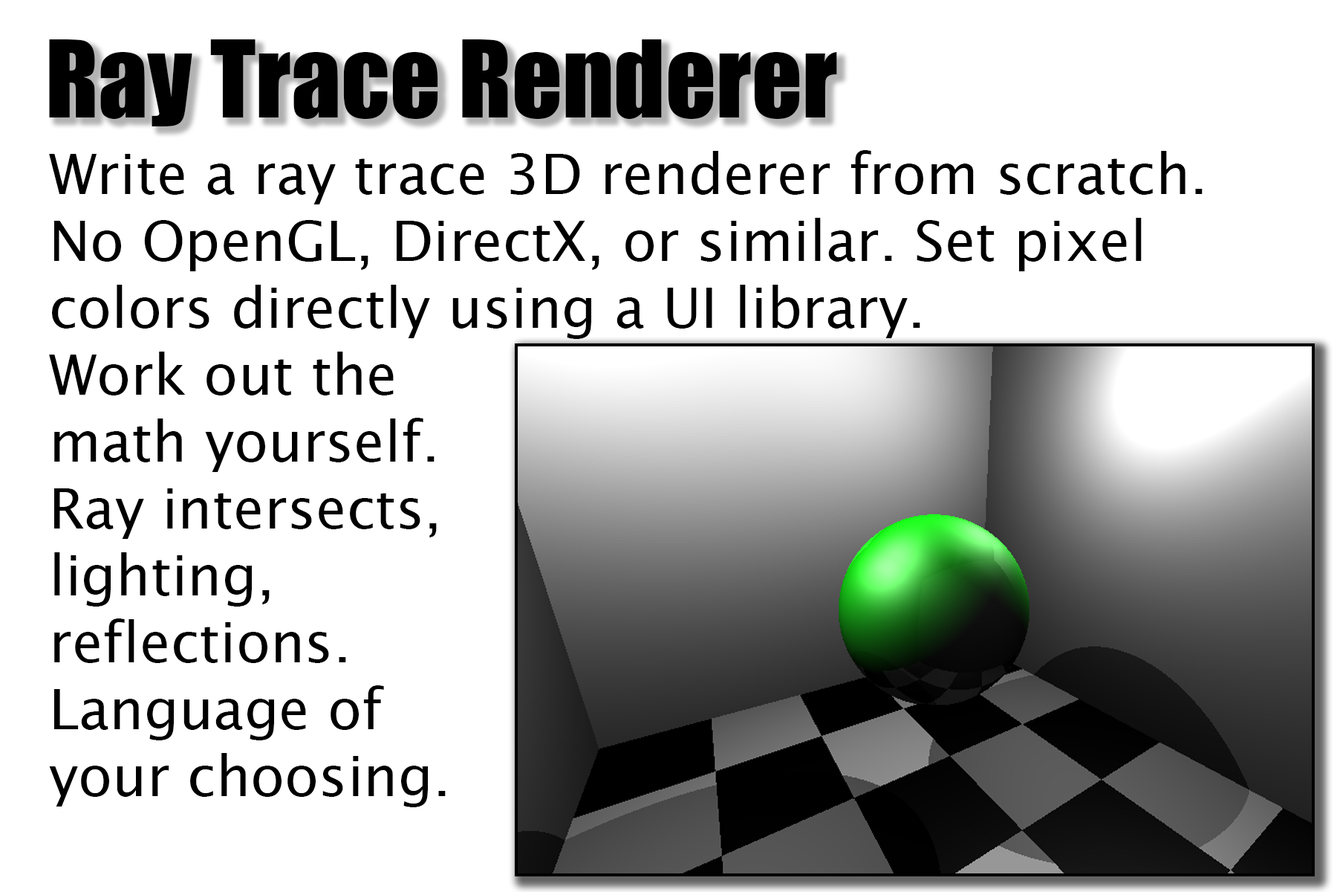
<style>
.page{position:relative;width:1337px;height:892px;background:#ffffff}
.page>*{position:absolute;margin:0}
.t1{font:99.1px "Impact";color:#000000}
.t2{font:55.7px "LucidaSans";color:#000000}
</style>
<div class="page">
<p class="t1" style="left:49px;top:39px;width:788px;height:87px">Ray Trace Renderer</p>
<p class="t2" style="left:49px;top:150px;width:1154px;height:657px">Write a ray trace 3D renderer from scratch.<br>No OpenGL, DirectX, or similar. Set pixel<br>colors directly using a UI library. <br>Work out the <br>math yourself.<br>Ray intersects, <br>lighting, <br>reflections. <br>Language of <br>your choosing.</p>
</div>
